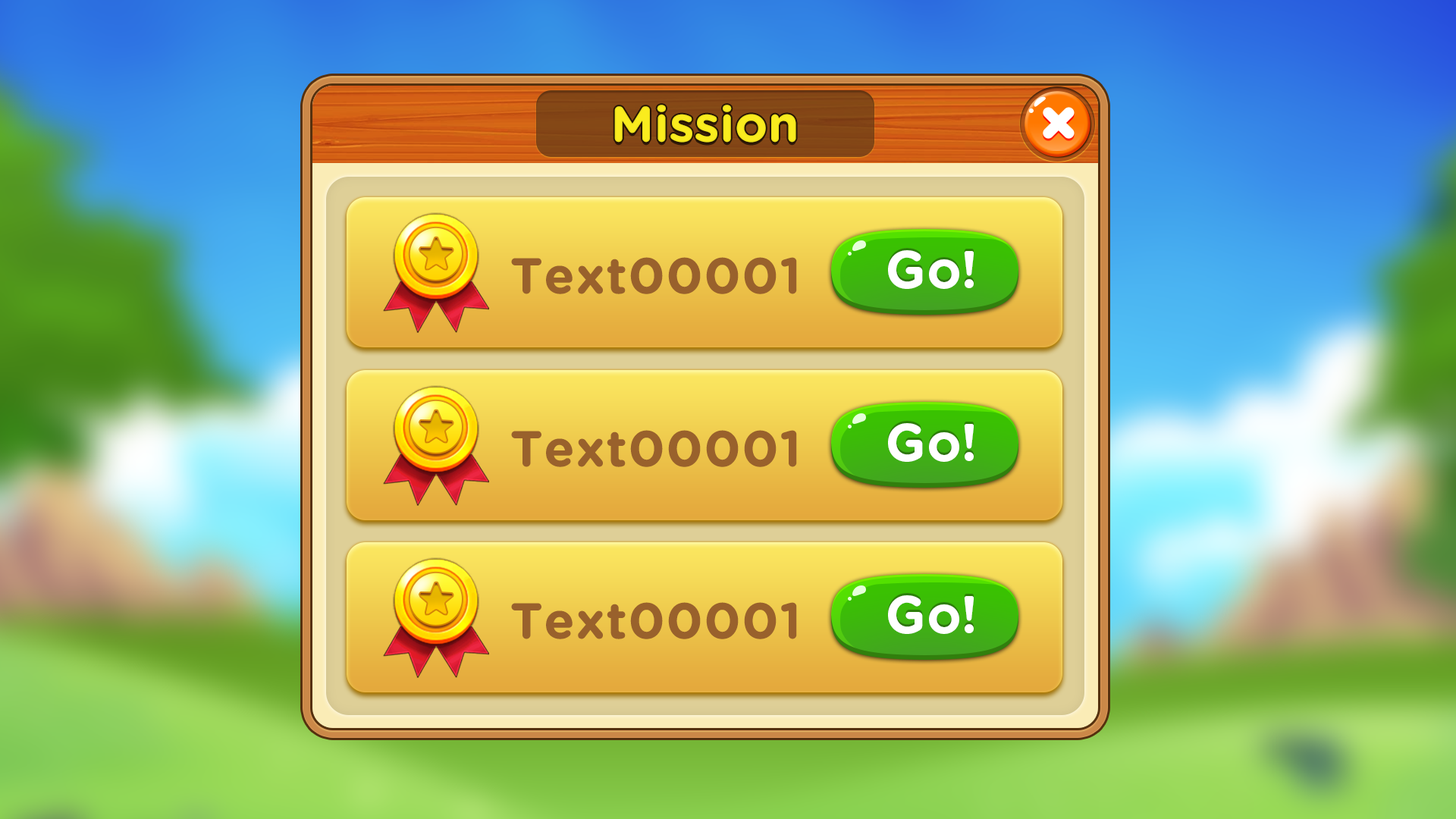
<style>
.page{position:relative;width:1456px;height:819px}
.page>*{position:absolute;margin:0}
.t1{font:50px "GothamRounded-Bold";color:#fff31e}
.t2{font:50px "GothamRounded-Bold";color:#99612c;font-weight:bold}
.t3{font:52.5px "GothamRounded-Bold";letter-spacing:-0.025em;color:#ffffff}
</style>
<div class="page">
<p class="t1" style="left:614px;top:105px;width:182px;height:38px;opacity:0.95">Mission</p>
<p class="t2" style="left:511px;top:257px;width:286px;height:37px">Text00001</p>
<p class="t3" style="left:888px;top:250px;width:86px;height:39px">Go!</p>
<p class="t3" style="left:888px;top:423px;width:86px;height:39px">Go!</p>
<p class="t2" style="left:511px;top:430px;width:286px;height:37px">Text00001</p>
<p class="t2" style="left:511px;top:602px;width:286px;height:37px">Text00001</p>
<p class="t3" style="left:888px;top:595px;width:86px;height:39px">Go!</p>
</div>
